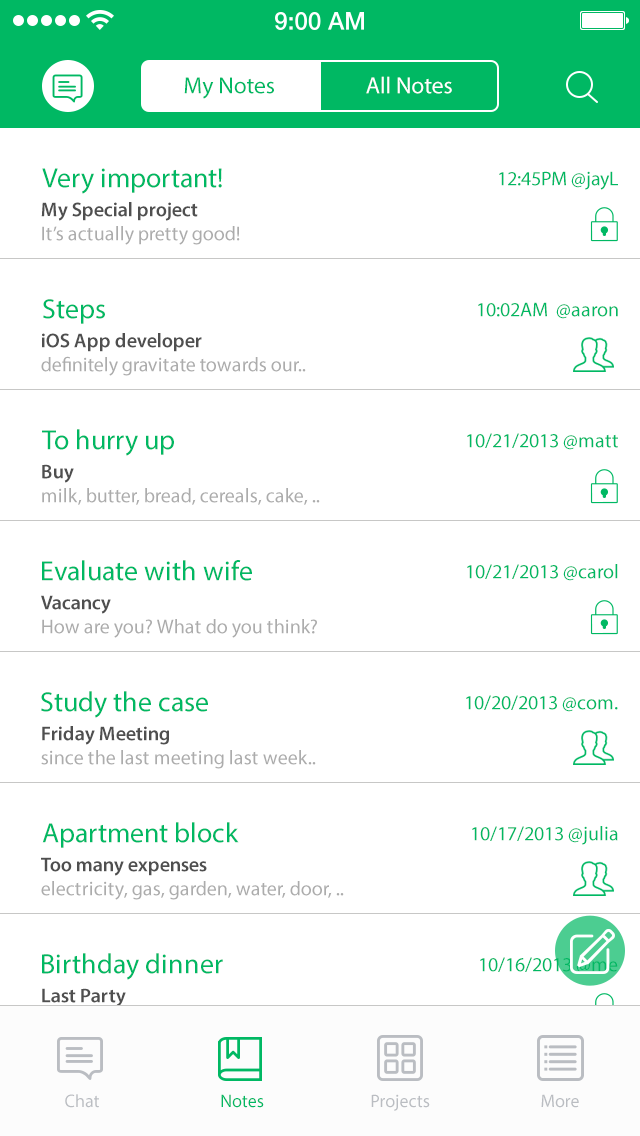
<style>
.page{position:relative;width:640px;height:1136px;background:#ffffff}
.page>*{position:absolute;margin:0}
.t1{font:23.4px "MyriadPro-Regular";color:#00b863}
.t2{font:23.4px "MyriadPro-Regular";color:#ffffff}
.t3{font:28px "MyriadPro-Regular";color:#00b863}
.t4{font:20px "MyriadPro-Regular";color:#00b863}
.t5{font:20px "MyriadPro-Regular";color:#acacac}
.t6{font:20px "MyriadPro-Semibold";color:#4f4f4f}
.t7{font:20px "MyriadPro-Regular"}
.t8{font:20px "MyriadPro-Semibold"}
.t9{font:18px "MyriadPro-Regular";color:#babdc2}
.t10{font:18px "MyriadPro-Regular";color:#00b863}
</style>
<div class="page">
<p class="t1" style="left:184px;top:77px;width:90px;height:22px">My Notes</p>
<p class="t2" style="left:366px;top:76px;width:86px;height:18px">All Notes</p>
<p class="t3" style="left:42px;top:168px;width:180px;height:26px">Very important!</p>
<p class="t4" style="left:499px;top:171px;width:119px;height:19px">12:45PM @jayL</p>
<p class="t5" style="left:41px;top:202px;width:199px;height:43px"><span class="t6">My Special project<br></span>It’s actually pretty good!</p>
<p class="t3" style="left:43px;top:299px;width:62px;height:25px">Steps</p>
<p class="t4" style="left:478px;top:302px;width:140px;height:17px">10:02AM  @aaron</p>
<p class="t5" style="left:41px;top:333px;width:265px;height:43px"><span class="t6">iOS App developer<br></span>definitely gravitate towards our..</p>
<p class="t3" style="left:42px;top:429px;width:132px;height:27px">To hurry up</p>
<p class="t4" style="left:467px;top:433px;width:151px;height:17px">10/21/2013 @matt</p>
<p class="t5" style="left:42px;top:464px;width:278px;height:41px"><span class="t6">Buy<br></span>milk, butter, bread, cereals, cake, ..</p>
<p class="t3" style="left:42px;top:560px;width:210px;height:21px">Evaluate with wife</p>
<p class="t4" style="left:467px;top:564px;width:151px;height:17px">10/21/2013 @carol</p>
<p class="t5" style="left:41px;top:595px;width:276px;height:43px"><span class="t6">Vacancy<br></span>How are you? What do you think?</p>
<p class="t3" style="left:41px;top:691px;width:167px;height:27px">Study the case</p>
<p class="t4" style="left:466px;top:695px;width:152px;height:17px">10/20/2013 @com.</p>
<p class="t5" style="left:41px;top:726px;width:275px;height:43px"><span class="t6">Friday Meeting<br></span>since the last meeting last week..</p>
<p class="t3" style="left:42px;top:822px;width:197px;height:26px">Apartment block</p>
<p class="t4" style="left:472px;top:826px;width:146px;height:19px">10/17/2013 @julia</p>
<p class="t5" style="left:41px;top:857px;width:303px;height:43px"><span class="t6">Too many expenses<br></span>electricity, gas, garden, water, door, ..</p>
<p class="t3" style="left:42px;top:953px;width:181px;height:27px">Birthday dinner</p>
<p class="t4" style="left:480px;top:957px;width:138px;height:17px">10/16/2013 @me</p>
<p class="t7" style="left:42px;top:988px;width:198px;height:43px"><span class="t8">Last Party<br></span>It’s actually pretty good!</p>
<p class="t9" style="left:65px;top:1094px;width:34px;height:14px">Chat</p>
<p class="t10" style="left:221px;top:1094px;width:43px;height:14px">Notes</p>
<p class="t9" style="left:371px;top:1094px;width:59px;height:17px">Projects</p>
<p class="t9" style="left:541px;top:1094px;width:38px;height:14px">More</p>
</div>
